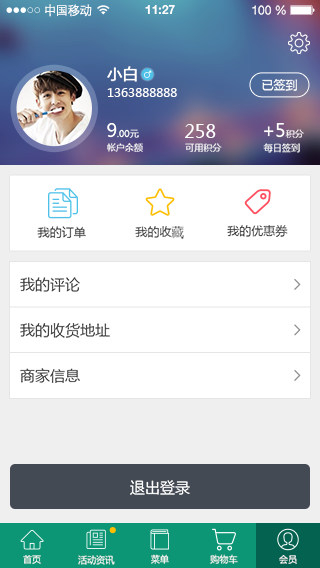
<style>
.page{position:relative;width:320px;height:568px;background:#ffffff}
.page>*{position:absolute;margin:0}
.t1{font:12.5px "STXihei";letter-spacing:-0.045em;color:#fefefe}
.t2{font:12.3px "HelveticaNeueLTPro-Bd";color:#ffffff}
.t3{font:12.3px "HelveticaNeueLTStd-Roman";color:#ffffff}
.t4{font:15px "MicrosoftYaHei";color:#ffffff;font-weight:bold}
.t5{font:12px "MicrosoftYaHei";color:#ffffff}
.t6{font:9px "MicrosoftYaHei";color:#ffffff}
.t7{font:18px "MicrosoftYaHei";color:#ffffff}
.t8{font:12px "MicrosoftYaHei";color:#424242}
.t9{font:15px "MicrosoftYaHei";color:#414141}
.t10{font:15px "MicrosoftYaHei";color:#ffffff}
</style>
<div class="page">
<p class="t1" style="left:45px;top:4px;width:47px;height:13px">中国移动</p>
<p class="t2" style="left:145px;top:5px;width:30px;height:9px">11:27</p>
<p class="t3" style="left:252px;top:5px;width:34px;height:10px">100 %</p>
<p class="t4" style="left:107px;top:66px;width:30px;height:16px">小白</p>
<p class="t5" style="left:107px;top:88px;width:70px;height:9px">1363888888</p>
<p class="t5" style="left:262px;top:79px;width:35px;height:12px">已签到</p>
<p class="t6" style="left:107px;top:123px;width:32px;height:15px"><span class="t7">9</span>.00元</p>
<p class="t7" style="left:185px;top:124px;width:31px;height:14px">258</p>
<p class="t7" style="left:264px;top:123px;width:40px;height:15px">+5<span class="t6">积分</span></p>
<p class="t6" style="left:107px;top:143px;width:36px;height:9px">帐户余额</p>
<p class="t6" style="left:185px;top:143px;width:37px;height:9px">可用积分</p>
<p class="t6" style="left:263px;top:143px;width:37px;height:10px">每日签到</p>
<p class="t8" style="left:37px;top:226px;width:49px;height:12px">我的订单</p>
<p class="t8" style="left:135px;top:226px;width:49px;height:13px">我的收藏</p>
<p class="t8" style="left:227px;top:225px;width:61px;height:12px">我的优惠券</p>
<p class="t9" style="left:20px;top:277px;width:60px;height:15px">我的评论</p>
<p class="t9" style="left:20px;top:323px;width:90px;height:15px">我的收货地址</p>
<p class="t9" style="left:20px;top:368px;width:60px;height:15px">商家信息</p>
<p class="t10" style="left:130px;top:480px;width:60px;height:15px">退出登录</p>
<p class="t6" style="left:23px;top:555px;width:18px;height:9px">首页</p>
<p class="t6" style="left:78px;top:555px;width:37px;height:10px">活动资讯</p>
<p class="t6" style="left:151px;top:554px;width:18px;height:10px">菜单</p>
<p class="t6" style="left:210px;top:554px;width:28px;height:10px">购物车</p>
<p class="t6" style="left:279px;top:555px;width:18px;height:9px">会员</p>
</div>
